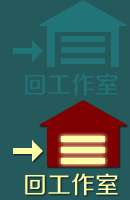
<style>
.page{position:relative;width:130px;height:200px;background:#245a5c}
.page>*{position:absolute;margin:0}
.t1{font:24px "FZZZHUNHJW--GB1-0";color:#217478}
.t2{font:24px "FZZZHUNHJW--GB1-0";color:#fffca8}
</style>
<div class="page">
<p class="t1" style="left:25px;top:73px;width:93px;height:23px">回工作室</p>
<p class="t2" style="left:25px;top:173px;width:93px;height:23px">回工作室</p>
</div>
